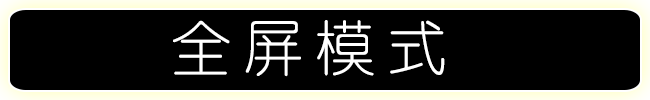
<style>
.page{position:relative;width:650px;height:100px;background:#000000}
.page>*{position:absolute;margin:0}
.t1{font:60px "YouYuan";letter-spacing:0.2em;color:#ffffff}
</style>
<div class="page">
<p class="t1" style="left:173px;top:20px;width:272px;height:57px">全屏模式</p>
</div>
